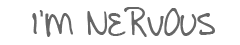
<style>
.page{position:relative;width:240px;height:45px;background:#ffffff}
.page>*{position:absolute;margin:0}
.t1{font:36px "AEnigmaScrawl(BRK)";color:#666666}
.t2{font:36px "Raleway";color:#666666}
</style>
<div class="page">
<p class="t1" style="left:32px;top:7px;width:183px;height:30px">I<span class="t2">’</span>M NERVOUS</p>
</div>
